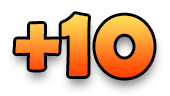
<style>
.page{position:relative;width:170px;height:96px;background:#ffffff}
.page>*{position:absolute;margin:0}
.t1{font:100px "BerlinSansFBDemi-Bold"}
</style>
<div class="page">
<p class="t1" style="left:15px;top:14px;width:139px;height:64px">+10</p>
</div>
